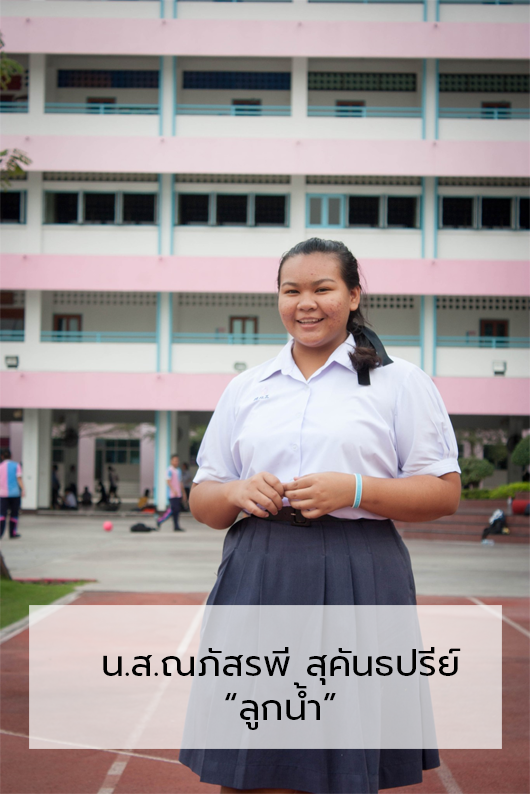
<style>
.page{position:relative;width:530px;height:794px}
.page>*{position:absolute;margin:0}
.t1{font:36.7px "Prompt-Regular";color:#000000}
</style>
<div class="page">
<p class="t1" style="left:103px;top:647px;width:358px;height:83px">น.ส.ณภัสรพี สุคันธปรีย์<br>         “ลูกน้ำ”</p>
</div>
